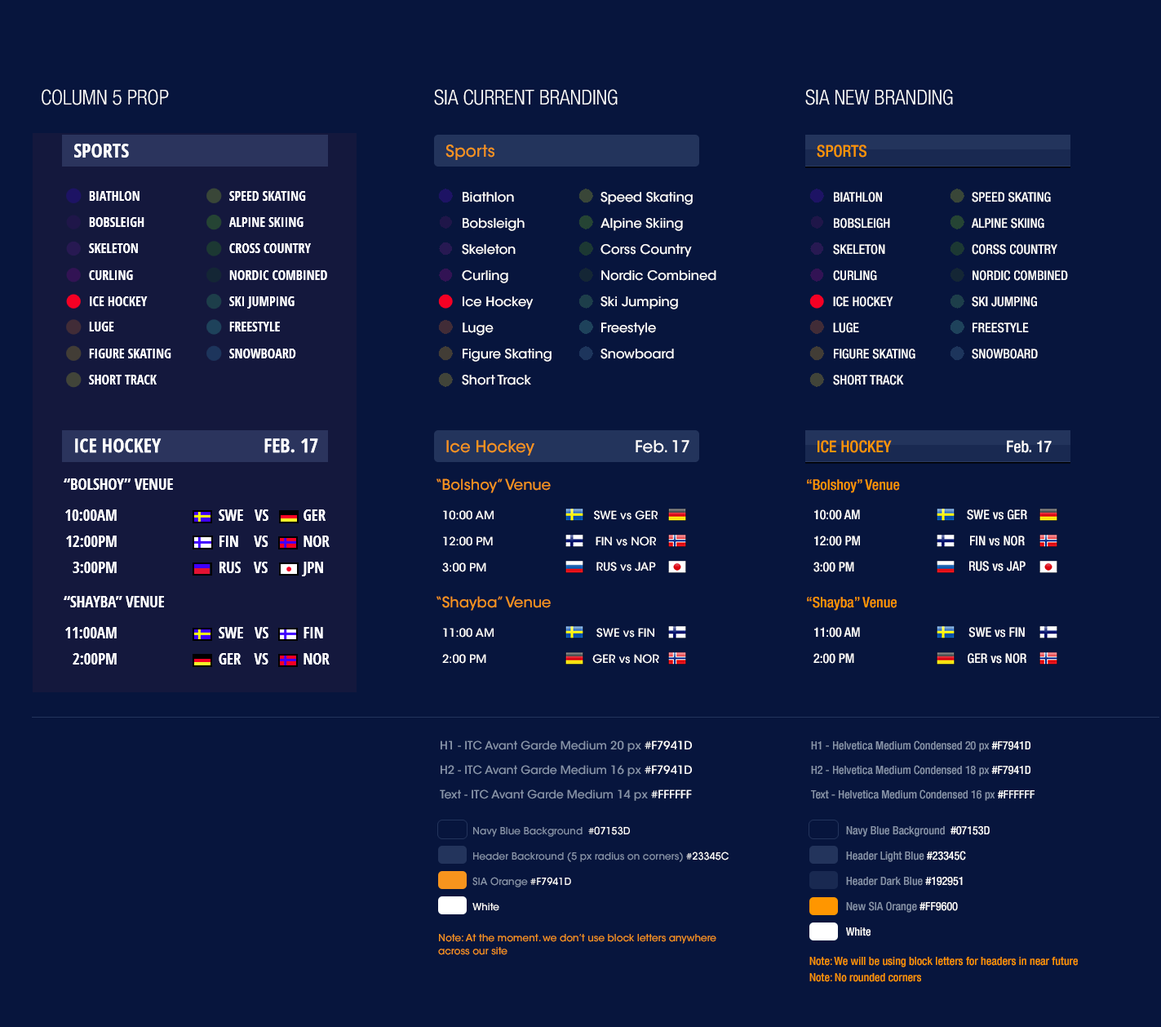
<style>
.page{position:relative;width:1161px;height:1027px;background:#07153d}
.page>*{position:absolute;margin:0}
.t1{font:20.7px "HelveticaNeueLTCom-LtCn";color:#ffffff;text-transform:uppercase}
.t2{font:16.3px "ITCAvantGardeStd-Md";color:#f7941d}
.t3{font:16.3px "HelveticaNeueLTCom-MdCn";color:#ff9600;text-transform:uppercase}
.t4{font:13.1px/26.1px "ITCAvantGardeStd-Md";color:#fffffe}
.t5{font:13.1px/26.1px "HelveticaNeueLTCom-MdCn";color:#fffffe;text-transform:uppercase}
.t6{font:16.3px "ITCAvantGardeStd-Md";color:#ffffff}
.t7{font:16.3px "HelveticaNeueLTCom-MdCn";color:#ffffff}
.t8{font:14.7px "ITCAvantGardeStd-Md";color:#f7941d}
.t9{font:14.7px "HelveticaNeueLTCom-MdCn";color:#ff9600}
.t10{font:13.1px/26.1px "HelveticaNeueLTCom-MdCn";color:#ffffff}
.t11{font:13.1px "HelveticaNeueLTCom-MdCn";color:#ffffff}
.t12{font:11.4px/26.1px "ITCAvantGardeStd-Md";color:#ffffff}
.t13{font:11.4px "ITCAvantGardeStd-Md";color:#ffffff}
.t14{font:11.4px/24.5px "ITCAvantGardeStd-Md";color:#8794aa}
.t15{font:11.4px/24.5px "ITCAvantGardeStd-Md";color:#ffffff}
.t16{font:11.4px/24.5px "HelveticaNeueLTCom-MdCn";color:#8794aa}
.t17{font:11.4px/24.5px "HelveticaNeueLTCom-MdCn";color:#ffffff}
.t18{font:9.8px/25.3px "ITCAvantGardeStd-Md";color:#8794aa}
.t19{font:9.8px/25.3px "ITCAvantGardeStd-Md";color:#ffffff}
.t20{font:11.4px/25.3px "HelveticaNeueLTCom-MdCn";color:#8794aa}
.t21{font:11.4px/25.3px "HelveticaNeueLTCom-MdCn";color:#ffffff}
.t22{font:9.8px/13.1px "ITCAvantGardeStd-Md";color:#f7941d}
.t23{font:11.4px "HelveticaNeueLTCom-MdCn";color:#ff9600}
</style>
<div class="page">
<p class="t1" style="left:42px;top:89px;width:127px;height:16px">column 5 prop</p>
<p class="t1" style="left:434px;top:89px;width:184px;height:16px">sia current branding</p>
<p class="t1" style="left:806px;top:89px;width:147px;height:16px">sia new branding</p>
<p class="t2" style="left:446px;top:144px;width:49px;height:16px">Sports</p>
<p class="t3" style="left:817px;top:144px;width:50px;height:14px">Sports</p>
<p class="t4" style="left:462px;top:192px;width:90px;height:193px">Biathlon<br>Bobsleigh<br>Skeleton<br>Curling<br>Ice Hockey<br>Luge<br>Figure Skating<br>Short Track</p>
<p class="t4" style="left:601px;top:192px;width:116px;height:167px">Speed Skating<br>Alpine Skiing<br>Corss Country<br>Nordic Combined<br>Ski Jumping<br>Freestyle<br>Snowboard</p>
<p class="t5" style="left:833px;top:192px;width:83px;height:193px">Biathlon<br>Bobsleigh<br>Skeleton<br>Curling<br>Ice Hockey<br>Luge<br>Figure Skating<br>Short Track</p>
<p class="t5" style="left:971px;top:192px;width:97px;height:167px">Speed Skating<br>Alpine Skiing<br>Corss Country<br>Nordic Combined<br>Ski Jumping<br>Freestyle<br>Snowboard</p>
<p class="t2" style="left:446px;top:440px;width:89px;height:15px">Ice Hockey</p>
<p class="t6" style="left:636px;top:440px;width:54px;height:13px">Feb. 17</p>
<p class="t3" style="left:818px;top:440px;width:74px;height:13px">Ice Hockey</p>
<p class="t7" style="left:1007px;top:440px;width:45px;height:13px">Feb. 17</p>
<p class="t8" style="left:437px;top:478px;width:114px;height:15px">“Bolshoy” Venue</p>
<p class="t9" style="left:807px;top:479px;width:93px;height:14px">“Bolshoy” Venue</p>
<p class="t10" style="left:814px;top:509px;width:46px;height:63px">10:00 AM<br>12:00 PM<br>3:00 PM</p>
<p class="t11" style="left:967px;top:509px;width:61px;height:11px">SWE vs GER</p>
<p class="t12" style="left:442px;top:510px;width:52px;height:62px">10:00 AM<br>12:00 PM<br>3:00 PM</p>
<p class="t13" style="left:594px;top:510px;width:64px;height:10px">SWE vs GER</p>
<p class="t13" style="left:596px;top:536px;width:60px;height:10px">FIN vs NOR</p>
<p class="t11" style="left:970px;top:535px;width:55px;height:11px">FIN vs NOR</p>
<p class="t13" style="left:597px;top:562px;width:59px;height:9px">RUS vs JAP</p>
<p class="t11" style="left:970px;top:561px;width:56px;height:10px">RUS vs JAP</p>
<p class="t8" style="left:437px;top:596px;width:114px;height:14px">“Shayba” Venue</p>
<p class="t9" style="left:807px;top:597px;width:90px;height:13px">“Shayba” Venue</p>
<p class="t12" style="left:442px;top:628px;width:52px;height:36px">11:00 AM<br>2:00 PM</p>
<p class="t13" style="left:597px;top:628px;width:58px;height:9px">SWE vs FIN</p>
<p class="t10" style="left:814px;top:627px;width:46px;height:37px">11:00 AM<br>2:00 PM</p>
<p class="t11" style="left:969px;top:627px;width:56px;height:10px">SWE vs FIN</p>
<p class="t13" style="left:593px;top:654px;width:66px;height:10px">GER vs NOR</p>
<p class="t11" style="left:968px;top:653px;width:59px;height:11px">GER vs NOR</p>
<p class="t14" style="left:440px;top:740px;width:252px;height:61px">H1 - ITC Avant Garde Medium 20 px <span class="t15">#F7941D <br></span>H2 - ITC Avant Garde Medium 16 px <span class="t15">#F7941D<br></span>Text - ITC Avant Garde Medium 14 px <span class="t15">#FFFFFF</span></p>
<p class="t16" style="left:811px;top:740px;width:224px;height:61px">H1 - Helvetica Medium Condensed 20 px <span class="t17">#F7941D <br></span>H2 - Helvetica Medium Condensed 18 px <span class="t17">#F7941D<br></span>Text - Helvetica Medium Condensed 16 px <span class="t17">#FFFFFF</span></p>
<p class="t18" style="left:473px;top:826px;width:256px;height:85px">Navy Blue Background  <span class="t19">#07153D<br></span>Header Backround (5 px radius on corners) <span class="t19">#23345C<br></span>SIA Orange <span class="t19">#F7941D<br>White</span></p>
<p class="t20" style="left:846px;top:826px;width:144px;height:110px">Navy Blue Background  <span class="t21">#07153D<br></span>Header Light Blue <span class="t21">#23345C<br></span>Header Dark Blue <span class="t21">#192951<br></span>New SIA Orange <span class="t21">#FF9600<br>White</span></p>
<p class="t22" style="left:438px;top:934px;width:279px;height:21px">Note: At the moment. we don’t use block letters anywhere<br>across our site</p>
<p class="t23" style="left:810px;top:957px;width:268px;height:10px">Note: We will be using block letters for headers in near future</p>
<p class="t23" style="left:810px;top:973px;width:111px;height:9px">Note: No rounded corners</p>
</div>
